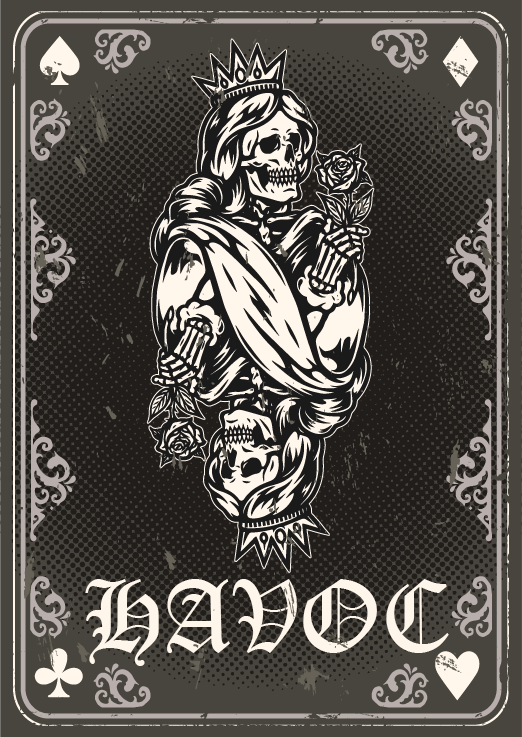
<style>
.page{position:relative;width:522px;height:737px;background:#47453d}
.page>*{position:absolute;margin:0}
.t1{font:100px "OldEnglishTextMT";color:#fff6ec;scale:0.95 1}
</style>
<div class="page">
<p class="t1" style="left:85px;top:579px;width:364px;height:87px">HAVOC</p>
</div>
